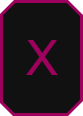
<style>
.page{position:relative;width:83px;height:116px;background:#111111}
.page>*{position:absolute;margin:0}
.t1{font:48px "ArialMT";color:#9e005d}
</style>
<div class="page">
<p class="t1" style="left:26px;top:40px;width:32px;height:35px">X</p>
</div>
